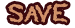
<style>
.page{position:relative;width:75px;height:28px;background:#ffffff}
.page>*{position:absolute;margin:0}
.t1{font:24px "TOBACCO";color:#c4845a;font-weight:bold}
</style>
<div class="page">
<p class="t1" style="left:8px;top:3px;width:60px;height:20px">SAVE</p>
</div>
